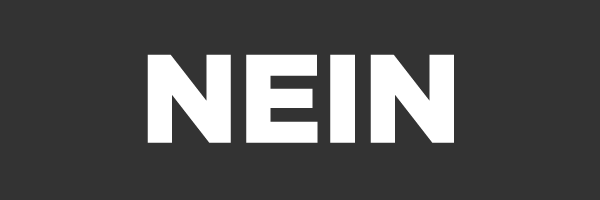
<style>
.page{position:relative;width:600px;height:200px;background:#333333}
.page>*{position:absolute;margin:0}
.t1{font:125.4px "Gotham-Black";color:#ffffff}
</style>
<div class="page">
<p class="t1" style="left:147px;top:54px;width:307px;height:89px">NEIN</p>
</div>
